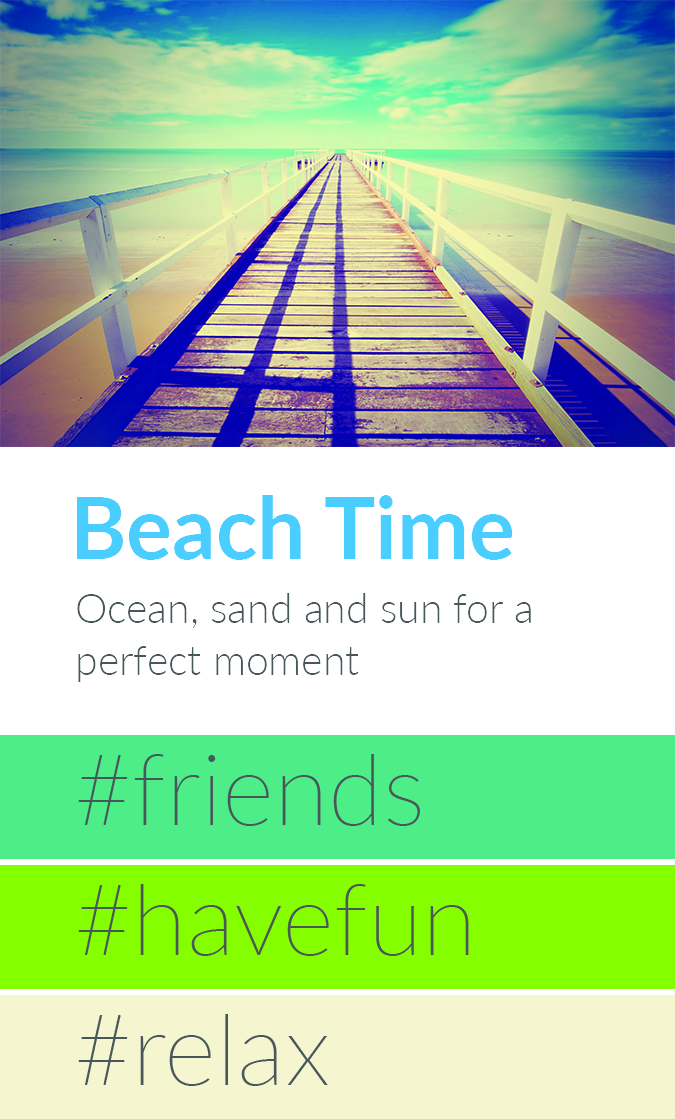
<style>
.page{position:relative;width:675px;height:1119px;background:#ffffff}
.page>*{position:absolute;margin:0}
.t1{font:86px "Lato-Bold";color:#4acdff}
.t2{font:41px/52px "Lato-Light";color:#48585a}
</style>
<div class="page">
<p class="t1" style="left:76px;top:495px;width:437px;height:65px">Beach Time</p>
<p class="t2" style="left:77px;top:593px;width:454px;height:89px;text-align:right">Ocean, sand and sun for a perfect moment</p>
</div>
